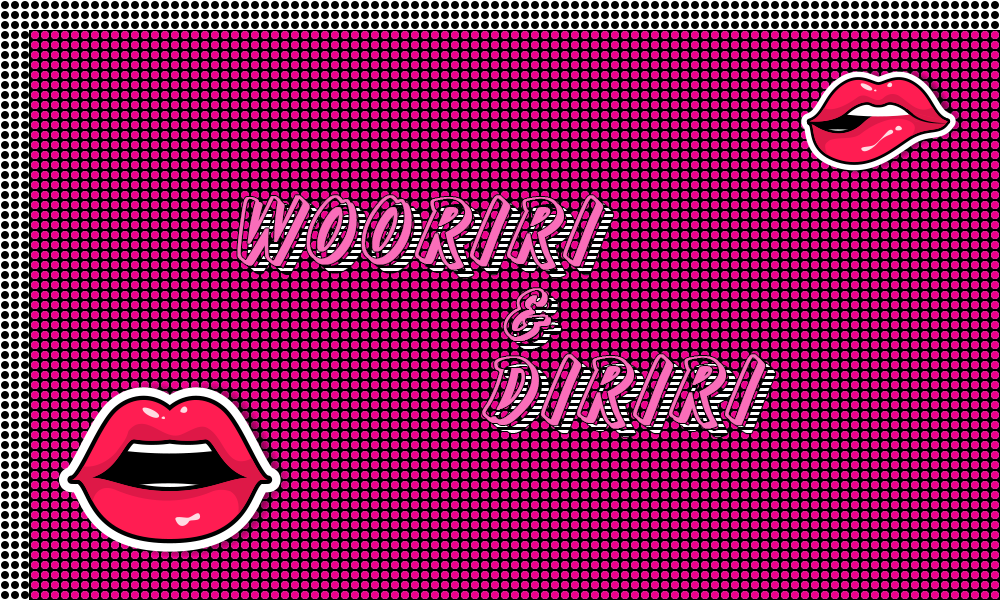
<style>
.page{position:relative;width:1000px;height:600px;background:#000000}
.page>*{position:absolute;margin:0}
.t1{font:90px "InformShadowCTT-Regular";letter-spacing:0.05em;color:#f96db9;text-transform:uppercase;font-weight:bold}
.t2{font:70px "InformShadowCTT-Regular";letter-spacing:0.05em;color:#f96db9;font-weight:bold}
</style>
<div class="page">
<p class="t1" style="left:237px;top:195px;width:367px;height:75px">wooriri</p>
<p class="t2" style="left:503px;top:288px;width:48px;height:53px">&amp;</p>
<p class="t1" style="left:482px;top:354px;width:284px;height:75px">diriri</p>
</div>
